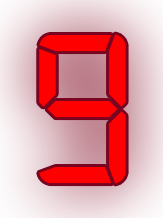
<style>
.page{position:relative;width:163px;height:218px}
.page>*{position:absolute;margin:0}
.t1{font:225.9px "Digital-7";color:#ff0000}
</style>
<div class="page">
<p class="t1" style="left:39px;top:34px;width:87px;height:150px">9</p>
</div>
